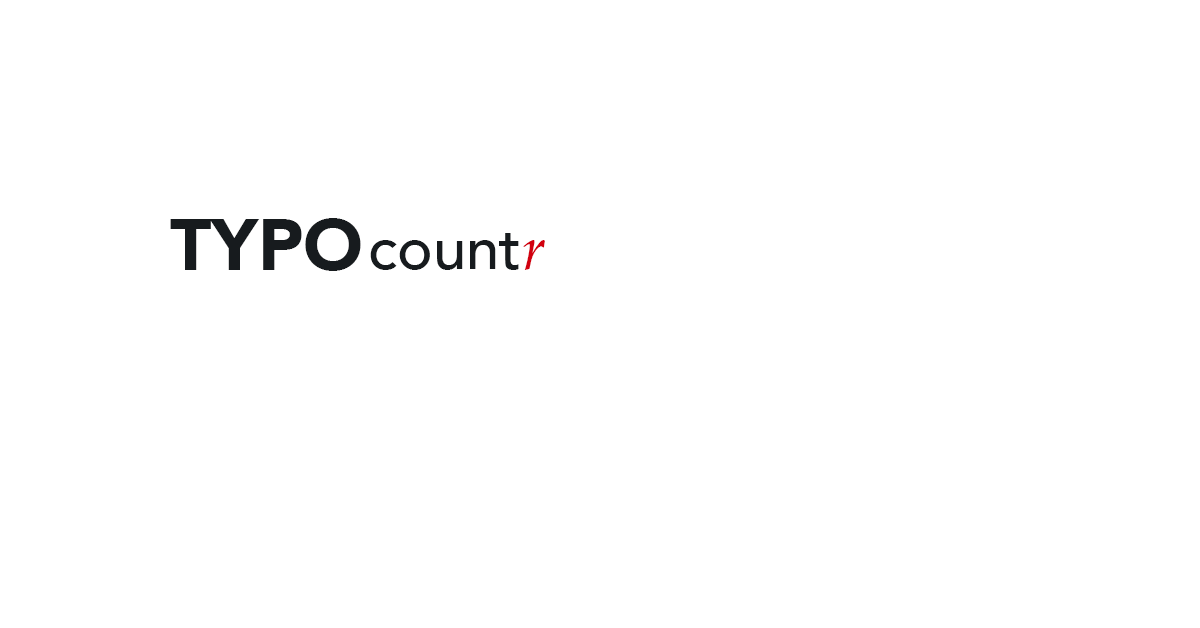
<style>
.page{position:relative;width:1200px;height:628px;background:#ffffff}
.page>*{position:absolute;margin:0}
.t1{font:72px "Avenir-Black";color:#171b1e}
.t2{font:60px "Avenir-Medium";color:#171b1e}
.t3{font:60px "Palatino-Italic";color:#d2000f}
</style>
<div class="page">
<p class="t1" style="left:170px;top:218px;width:191px;height:53px">TYPO</p>
<p class="t2" style="left:370px;top:233px;width:149px;height:37px">count</p>
<p class="t3" style="left:523px;top:240px;width:22px;height:30px">r</p>
</div>
